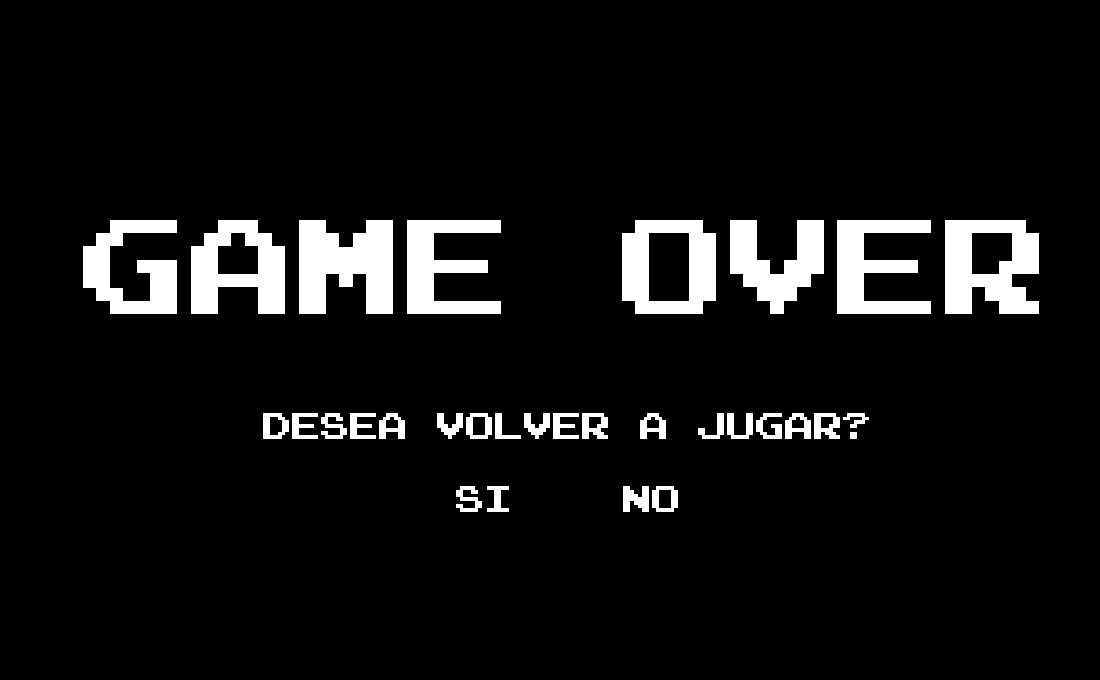
<style>
.page{position:relative;width:1100px;height:680px;background:#000000}
.page>*{position:absolute;margin:0}
.t1{font:110px "ArcadeNormal";color:#ffffff}
.t2{font:30px "ArcadeNormal";color:#ffffff}
</style>
<div class="page">
<p class="t1" style="left:83px;top:220px;width:956px;height:94px">GAME OVER</p>
<p class="t2" style="left:263px;top:413px;width:606px;height:26px">DESEA volver a jugar?</p>
<p class="t2" style="left:456px;top:486px;width:53px;height:26px">si</p>
<p class="t2" style="left:623px;top:486px;width:55px;height:26px">no</p>
</div>
